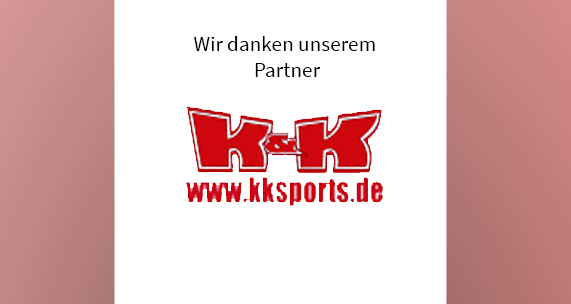
<style>
.page{position:relative;width:571px;height:304px;background:#ffffff}
.page>*{position:absolute;margin:0}
.t1{font:21.3px "SourceSansPro-Regular";color:#000000}
</style>
<div class="page">
<p class="t1" style="left:194px;top:36px;width:181px;height:41px;text-align:center">Wir danken unserem <br>Partner</p>
</div>
